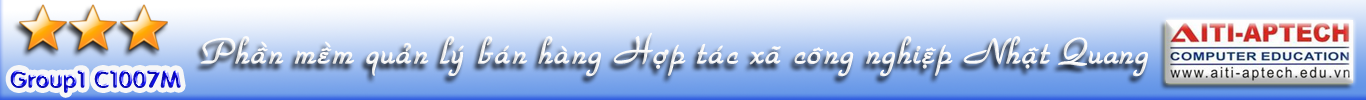
<style>
.page{position:relative;width:1366px;height:100px}
.page>*{position:absolute;margin:0}
.t1{font:37.3px "VNI-Park";color:#fbfbfb;font-weight:bold}
.t2{font:24px "VNI-Vari"}
</style>
<div class="page">
<p class="t1" style="left:200px;top:32px;width:948px;height:45px">Phaàn meàm quaûn lyù baùn haøng Hôïp taùc xaõ coâng nghieäp Nhaät Quang</p>
<p class="t2" style="left:10px;top:70px;width:171px;height:23px">Group1 C1007M</p>
</div>
